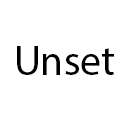
<style>
.page{position:relative;width:128px;height:128px;background:#ffffff}
.page>*{position:absolute;margin:0}
.t1{font:41.7px "MyriadPro-Regular";color:#000000}
</style>
<div class="page">
<p class="t1" style="left:17px;top:46px;width:97px;height:29px">Unset</p>
</div>
